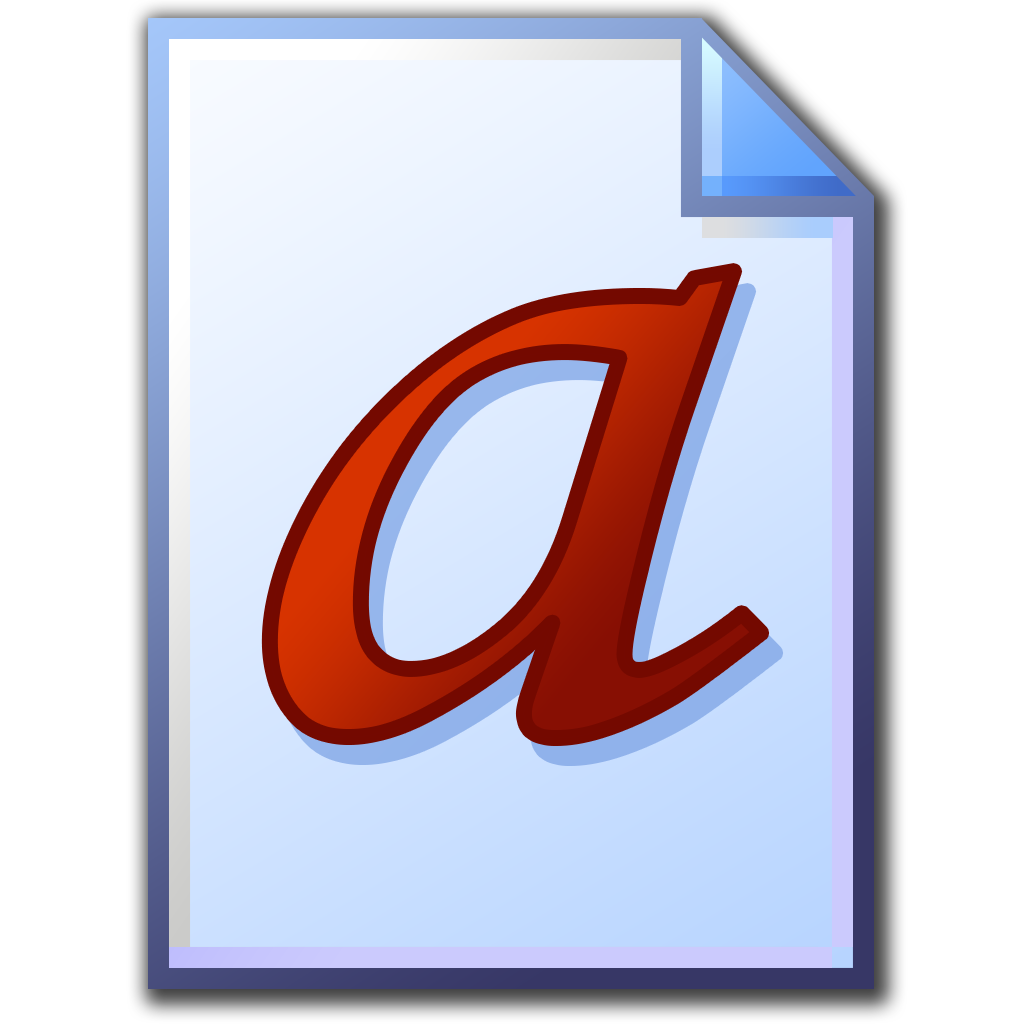
<style>
.page{position:relative;width:1024px;height:1024px;background:#ffffff}
.page>*{position:absolute;margin:0}
.t1{font:1060.7px "MonotypeCorsiva";scale:1.16 1}
</style>
<div class="page">
<p class="t1" style="left:269px;top:271px;width:493px;height:467px">a</p>
</div>
